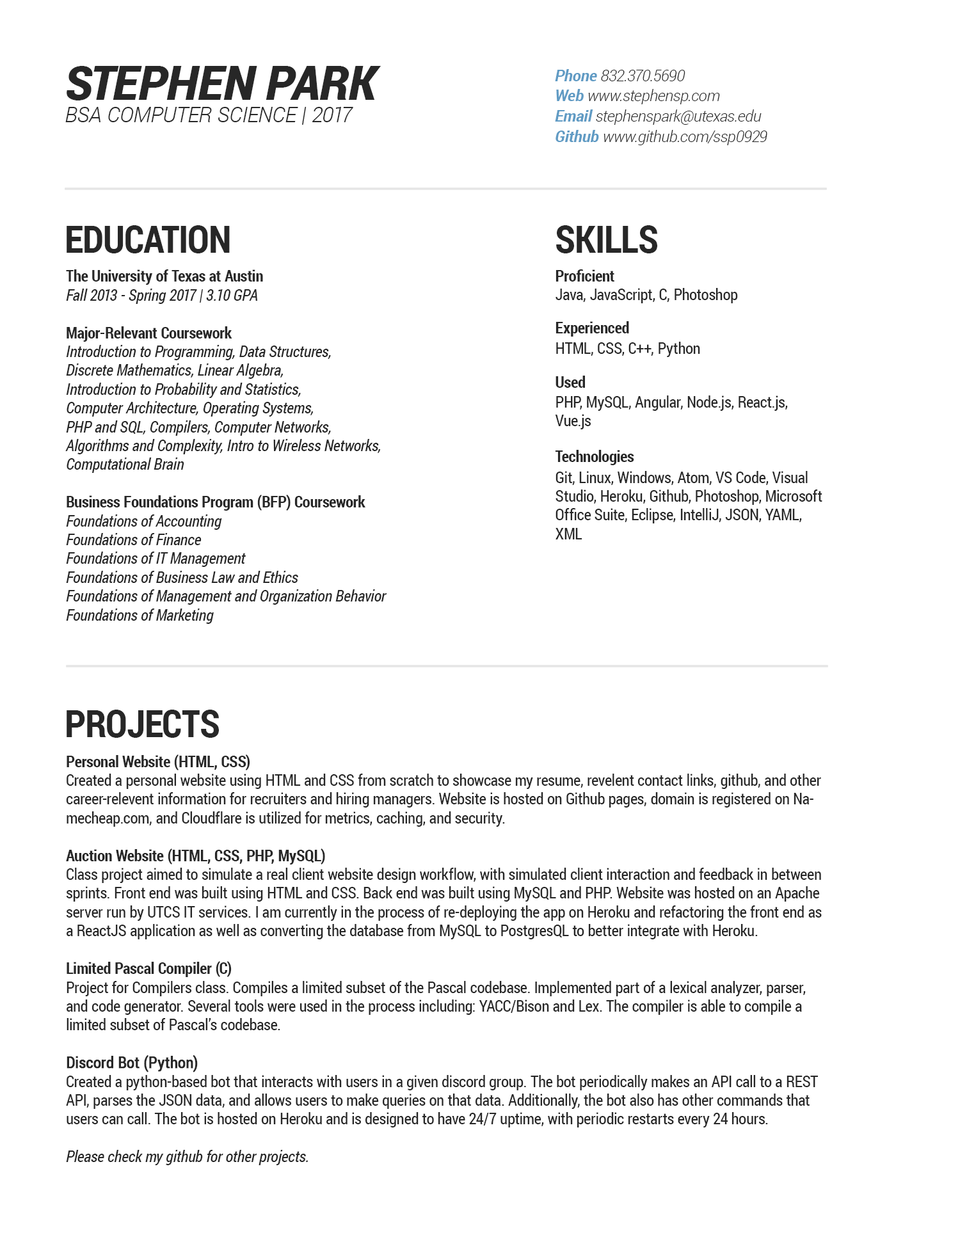
<style>
.page{position:relative;width:960px;height:1242px;background:#ffffff}
.page>*{position:absolute;margin:0}
.t1{font:47.1px "Roboto-BlackItalic";color:#272727}
.t2{font:15.7px/20.4px "Roboto-LightItalic";color:#272727}
.t3{font:15.7px/20.4px "Roboto-BoldItalic";color:#609bc4}
.t4{font:22px "Roboto-LightItalic";color:#272727}
.t5{font:37.6px "RobotoCondensed-Bold";color:#272727}
.t6{font:15.7px "RobotoCondensed-Italic";color:#272727}
.t7{font:15.7px "RobotoCondensed-Bold";color:#272727}
.t8{font:15.7px "RobotoCondensed-Regular";color:#272727}
.t9{font:15.7px "RobotoCondensed-Regular";color:#272727;font-weight:bold}
</style>
<div class="page">
<p class="t1" style="left:67px;top:66px;width:314px;height:34px">STEPHEN PARK</p>
<p class="t2" style="left:555px;top:69px;width:212px;height:76px"><span class="t3">Phone </span>832.370.5690<br><span class="t3">Web </span>www.stephensp.com<br><span class="t3">Email </span>stephenspark@utexas.edu<br><span class="t3">Github </span>www.github.com/ssp0929</p>
<p class="t4" style="left:65px;top:107px;width:288px;height:18px">BSA COMPUTER SCIENCE | 2017</p>
<p class="t5" style="left:67px;top:225px;width:163px;height:28px">EDUCATION</p>
<p class="t5" style="left:556px;top:225px;width:101px;height:28px">SKILLS</p>
<p class="t6" style="left:65px;top:269px;width:322px;height:355px"><span class="t7">The University of Texas at Austin<br></span>Fall 2013 - Spring 2017 | 3.10 GPA<br><span class="t7"><br>Major-Relevant Coursework<br></span>Introduction to Programming, Data Structures, <br>Discrete Mathematics, Linear Algebra, <br>Introduction to Probability and Statistics, <br>Computer Architecture, Operating Systems, <br>PHP and SQL, Compilers, Computer Networks, <br>Algorithms and Complexity, Intro to Wireless Networks, Computational Brain<br><br><span class="t7">Business Foundations Program (BFP) Coursework<br></span>Foundations of Accounting<br>Foundations of Finance<br>Foundations of IT Management<br>Foundations of Business Law and Ethics<br>Foundations of Management and Organization Behavior<br>Foundations of Marketing</p>
<p class="t7" style="left:555px;top:269px;width:59px;height:13px">Proficient</p>
<p class="t8" style="left:555px;top:288px;width:183px;height:15px">Java, JavaScript, C, Photoshop</p>
<p class="t7" style="left:555px;top:321px;width:74px;height:16px">Experienced</p>
<p class="t8" style="left:556px;top:342px;width:144px;height:15px">HTML, CSS, C++, Python</p>
<p class="t7" style="left:555px;top:376px;width:30px;height:12px">Used</p>
<p class="t8" style="left:555px;top:396px;width:233px;height:33px">PHP, MySQL, Angular, Node.js, React.js, Vue.js</p>
<p class="t7" style="left:555px;top:450px;width:79px;height:15px">Technologies</p>
<p class="t8" style="left:555px;top:471px;width:267px;height:68px">Git, Linux, Windows, Atom, VS Code, Visual Studio, Heroku, Github, Photoshop, Microsoft Office Suite, Eclipse, IntelliJ, JSON, YAML, XML</p>
<p class="t5" style="left:67px;top:710px;width:152px;height:28px">PROJECTS</p>
<p class="t8" style="left:66px;top:755px;width:756px;height:410px"><span class="t7">Personal Website (HTML, CSS)<br></span>Created a personal website using HTML and CSS from scratch to showcase my resume, revelent contact links, github, and other career-relevent information for recruiters and hiring managers. Website is hosted on Github pages, domain is registered on Namecheap.com, and Cloudflare is utilized for metrics, caching, and security.<br><br><span class="t7">Auction Website (HTML, CSS, PHP, MySQL)<br></span>Class project aimed to simulate a real client website design workflow, with simulated client interaction and feedback in between sprints. Front end was built using HTML and CSS. Back end was built using MySQL and PHP. Website was hosted on an Apache server run by UTCS IT services. I am currently in the process of re-deploying the app on Heroku and refactoring the front end as a ReactJS application as well as converting the database from MySQL to PostgresQL to better integrate with Heroku.<br><br><span class="t7">Limited Pascal Compiler (C)<br></span>Project for Compilers class. Compiles a limited subset of the Pascal codebase. Implemented part of a lexical analyzer, parser, and code generator. Several tools were used in the process including: YACC/Bison and Lex. The compiler is able to compile a limited subset of Pascal’s codebase.<br><br><span class="t9">Discord Bot (Python)<br></span>Created a python-based bot that interacts with users in a given discord group. The bot periodically makes an API call to a REST API, parses the JSON data, and allows users to make queries on that data. Additionally, the bot also has other commands that users can call. The bot is hosted on Heroku and is designed to have 24/7 uptime, with periodic restarts every 24 hours.<br><br><span class="t6">Please check my github for other projects.</span></p>
</div>
